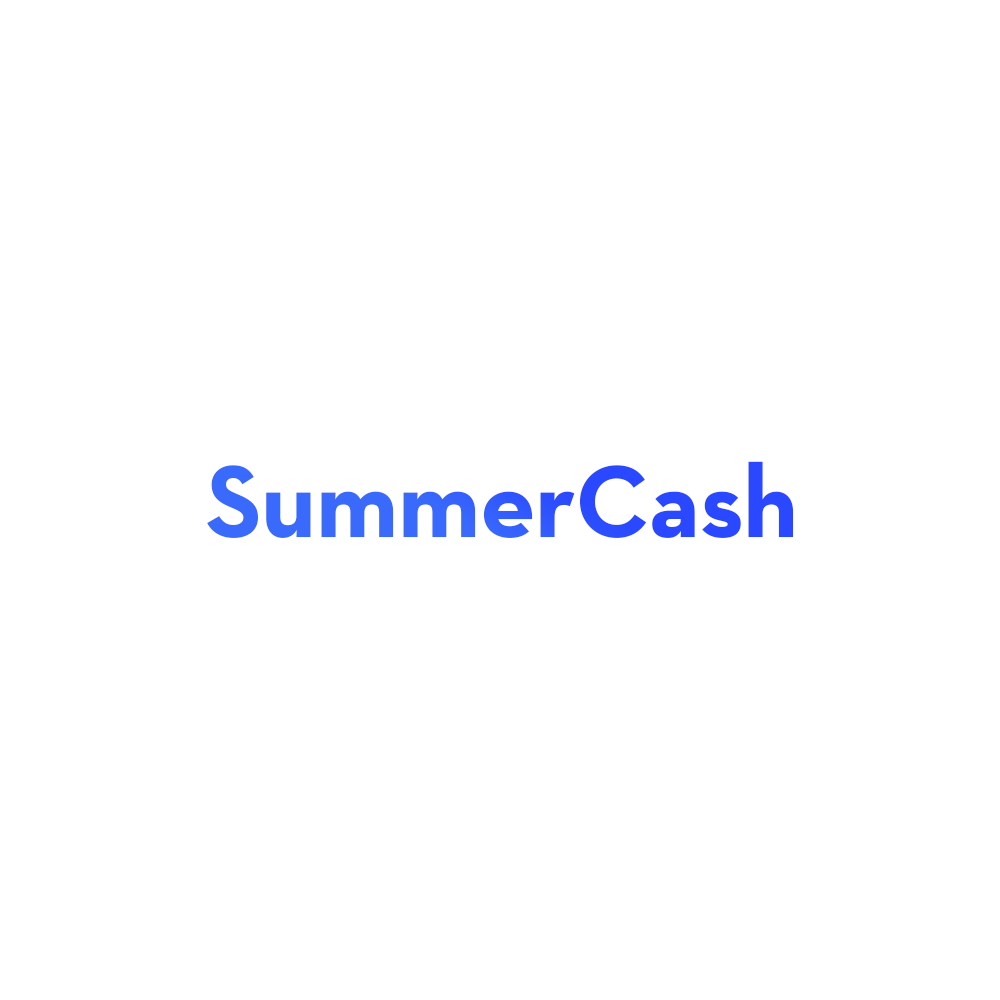
<style>
.page{position:relative;width:1000px;height:1000px;background:#ffffff}
.page>*{position:absolute;margin:0}
.t1{font:104.2px "NeutraText-Bold";letter-spacing:-0.005em}
</style>
<div class="page">
<p class="t1" style="left:207px;top:461px;width:587px;height:77px">SummerCash</p>
</div>
